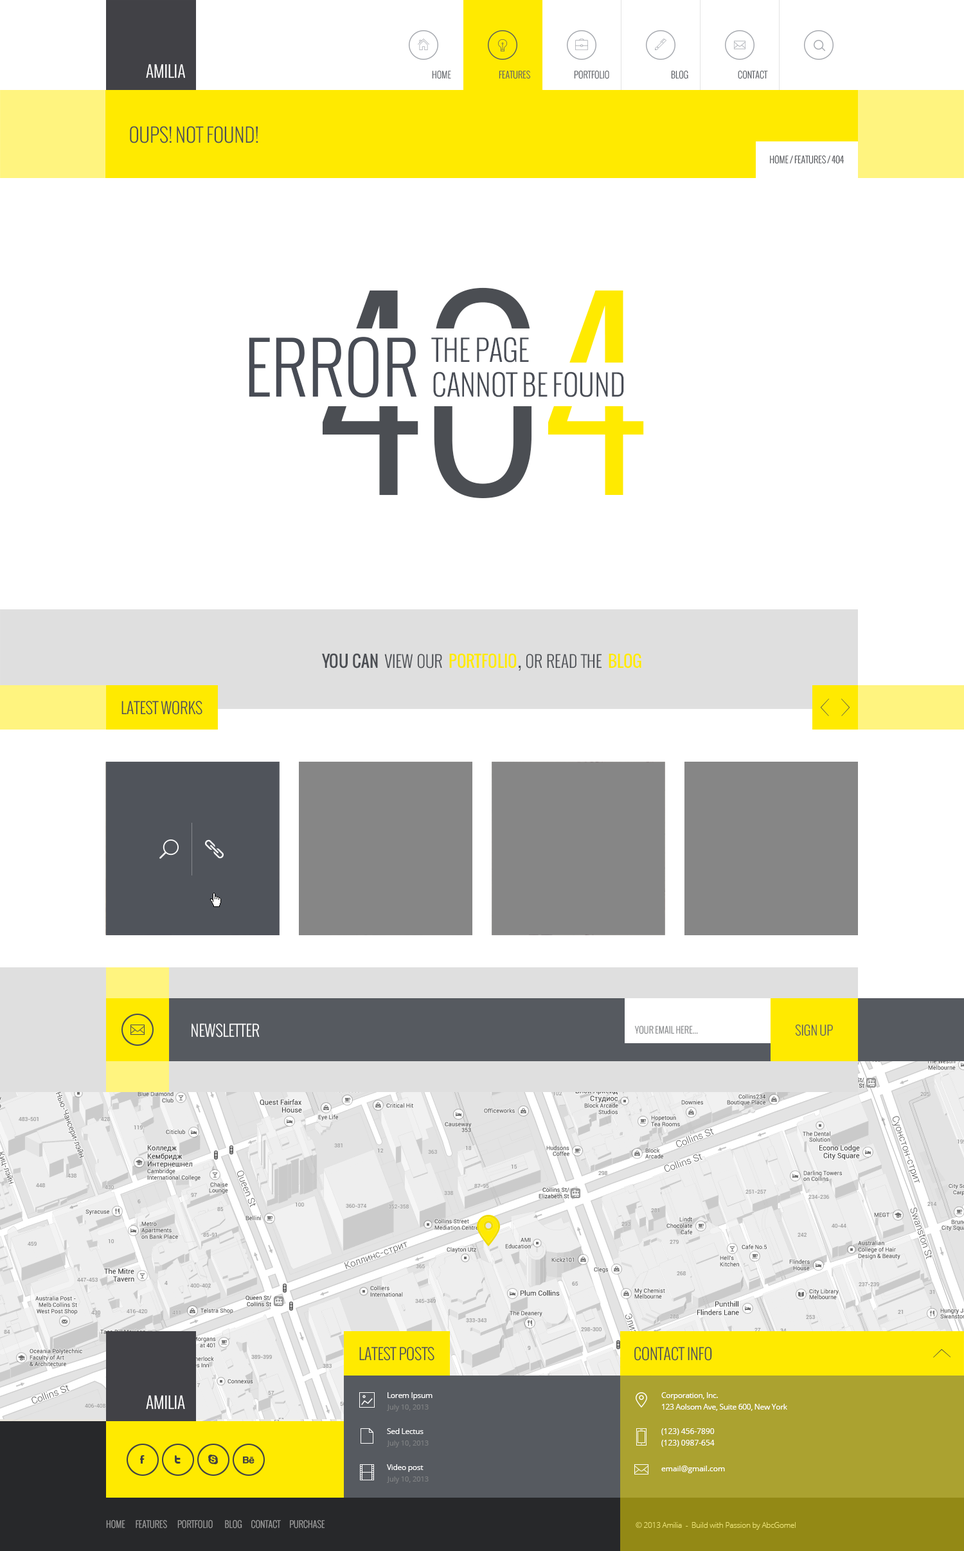
<style>
.page{position:relative;width:964px;height:1551px;background:#ffffff}
.page>*{position:absolute;margin:0}
.t1{font:16.1px "Oswald-Light";color:#ffffff;text-transform:uppercase}
.t2{font:9px "Oswald-Light";color:#565a60;text-transform:uppercase}
.t3{font:19.3px "Oswald-Light";color:#4b4e53;text-transform:uppercase}
.t4{font:9px "Oswald-Light";color:#4b4e53;text-transform:uppercase}
.t5{font:243.3px "Oswald-Light";color:#4b4e53}
.t6{font:243.3px "Oswald-Light";color:#ffea00}
.t7{font:70.1px "Oswald-Light";color:#484c55}
.t8{font:28.9px "Oswald-Light";color:#484c55}
.t9{font:23.1px "Oswald-Light";color:#4b4e53;font-variant:small-caps}
.t10{font:23.1px "Oswald";color:#4b4e53;font-variant:small-caps}
.t11{font:23.1px "Oswald";color:#ffea00;font-variant:small-caps}
.t12{font:15.4px "Oswald-Light";color:#4b4e53;text-transform:uppercase}
.t13{font:15.4px "Oswald-Light";color:#ffffff}
.t14{font:9px "Oswald-Light";letter-spacing:0.005em;color:#7e8082;text-transform:uppercase}
.t15{font:12.9px "Oswald-Light";color:#565a60}
.t16{font:15.4px "Oswald-Light";color:#4b4e53}
.t17{font:7.7px/11.6px "OpenSans";letter-spacing:-0.025em;color:#ffffff}
.t18{font:7.1px "OpenSans";color:#7e8082}
.t19{font:7.7px "OpenSans";letter-spacing:-0.025em;color:#ffffff}
.t20{font:7.7px/11.6px "OpenSans";color:#ffffff}
.t21{font:7.7px "OpenSans";color:#ffffff}
.t22{font:9px "Oswald-Light";color:#a1a1a1}
.t23{font:7.7px "OpenSans-Light";letter-spacing:-0.025em;color:#eee575}
</style>
<div class="page">
<p class="t1" style="left:146px;top:64px;width:39px;height:14px">AMILIA</p>
<p class="t2" style="left:432px;top:70px;width:19px;height:9px">Home</p>
<p class="t2" style="left:499px;top:70px;width:32px;height:9px">features</p>
<p class="t2" style="left:574px;top:70px;width:35px;height:9px">PORTFOLIO</p>
<p class="t2" style="left:671px;top:70px;width:17px;height:9px">BLOG</p>
<p class="t2" style="left:738px;top:70px;width:30px;height:9px">CONTACT</p>
<p class="t3" style="left:130px;top:126px;width:128px;height:17px">Oups! Not found!</p>
<p class="t4" style="left:770px;top:155px;width:75px;height:9px">home / FEATURES / 404</p>
<p class="t5" style="left:323px;top:287px;width:321px;height:211px">40<span class="t6">4</span></p>
<p class="t7" style="left:249px;top:337px;width:168px;height:61px">ERROR</p>
<p class="t8" style="left:431px;top:337px;width:193px;height:60px">THE PAGE<br>CANNOT BE FOUND</p>
<p class="t9" style="left:322px;top:653px;width:320px;height:18px"><span class="t10">you can </span>view our <span class="t11">portfolio</span>, or read the <span class="t11">blog</span></p>
<p class="t12" style="left:122px;top:701px;width:81px;height:14px">latest Works</p>
<p class="t13" style="left:192px;top:1023px;width:68px;height:15px">NEWSLETTER</p>
<p class="t14" style="left:634px;top:1025px;width:64px;height:9px">Your email here...</p>
<p class="t15" style="left:795px;top:1024px;width:38px;height:12px">SIGN UP</p>
<p class="t16" style="left:359px;top:1347px;width:76px;height:14px">LATEST POSTS</p>
<p class="t16" style="left:634px;top:1347px;width:78px;height:14px">CONTACT INFO</p>
<p class="t1" style="left:146px;top:1395px;width:39px;height:15px">AMILIA</p>
<p class="t17" style="left:388px;top:1392px;width:45px;height:8px">Lorem Ipsum<br>ipsumage post</p>
<p class="t17" style="left:662px;top:1392px;width:126px;height:19px">Corporation, Inc.<br>123 Aolsom Ave, Suite 600, New York</p>
<p class="t18" style="left:387px;top:1405px;width:42px;height:7px">July 10, 2013</p>
<p class="t19" style="left:387px;top:1428px;width:37px;height:6px">Sed Lectus</p>
<p class="t20" style="left:662px;top:1428px;width:53px;height:19px">(123) 456-7890<br>(123) 0987-654</p>
<p class="t18" style="left:387px;top:1441px;width:42px;height:7px">July 10, 2013</p>
<p class="t19" style="left:387px;top:1464px;width:37px;height:8px">Video post</p>
<p class="t21" style="left:662px;top:1466px;width:63px;height:7px">email@gmail.com</p>
<p class="t18" style="left:387px;top:1477px;width:42px;height:7px">July 10, 2013</p>
<p class="t22" style="left:106px;top:1520px;width:219px;height:9px">HOME       FEATURES       PORTFOLIO        BLOG      CONTACT      PURCHASE</p>
<p class="t23" style="left:636px;top:1522px;width:160px;height:8px">© 2013 Amilia  -  Build with Passion by AbcGomel</p>
</div>
